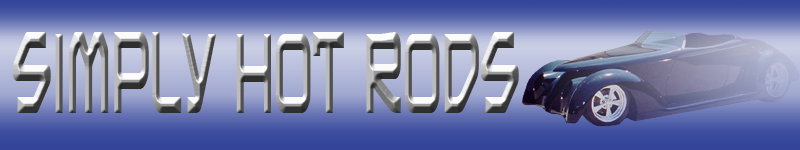
<style>
.page{position:relative;width:800px;height:150px}
.page>*{position:absolute;margin:0}
.t1{font:110.4px "MainframeBB";scale:0.43 1}
</style>
<div class="page">
<p class="t1" style="left:12px;top:32px;width:507px;height:81px">Simply Hot Rods</p>
</div>
